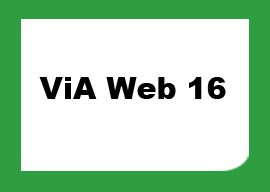
<style>
.page{position:relative;width:270px;height:192px;background:#ffffff}
.page>*{position:absolute;margin:0}
.t1{font:30px "Arial-Black";color:#010101}
</style>
<div class="page">
<p class="t1" style="left:39px;top:77px;width:187px;height:22px">ViA Web 16</p>
</div>
